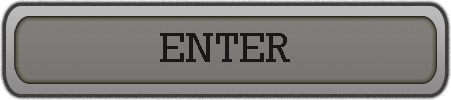
<style>
.page{position:relative;width:451px;height:100px}
.page>*{position:absolute;margin:0}
.t1{font:41.7px "Rockwell";color:#1a1a1a}
</style>
<div class="page">
<p class="t1" style="left:160px;top:33px;width:130px;height:29px">ENTER</p>
</div>
